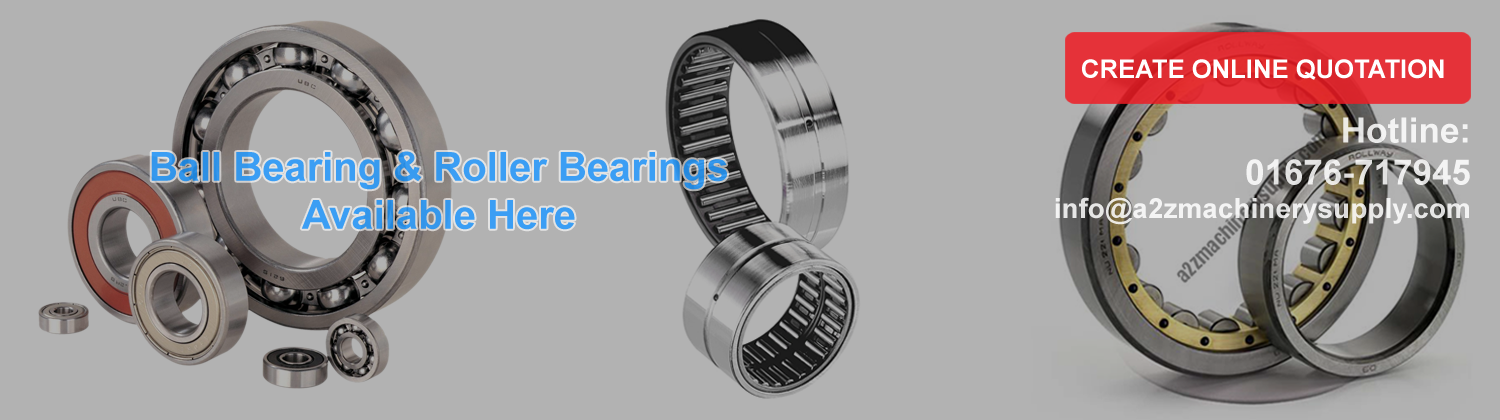
<style>
.page{position:relative;width:1500px;height:420px;background:#b2b2b2}
.page>*{position:absolute;margin:0}
.t1{font:25.6px "Arial-BoldMT";color:#ffffff}
.t2{font:28px "Arial-BoldMT";color:#ffffff}
.t3{font:35px "Arial-BoldMT";color:#ffffff}
.t4{font:40px "Arial-BoldMT";color:#3b9ef4}
</style>
<div class="page">
<p class="t1" style="left:1082px;top:59px;width:362px;height:21px">CREATE ONLINE QUOTATION</p>
<p class="t2" style="left:1055px;top:117px;width:415px;height:108px;text-align:right;opacity:0.85"><span class="t3">Hotline:<br>01676-717945<br></span>info@a2zmachinerysupply.com</p>
<p class="t4" style="left:151px;top:151px;width:576px;height:79px;text-align:center">Ball Bearing &amp; Roller Bearings<br>Available Here</p>
</div>
